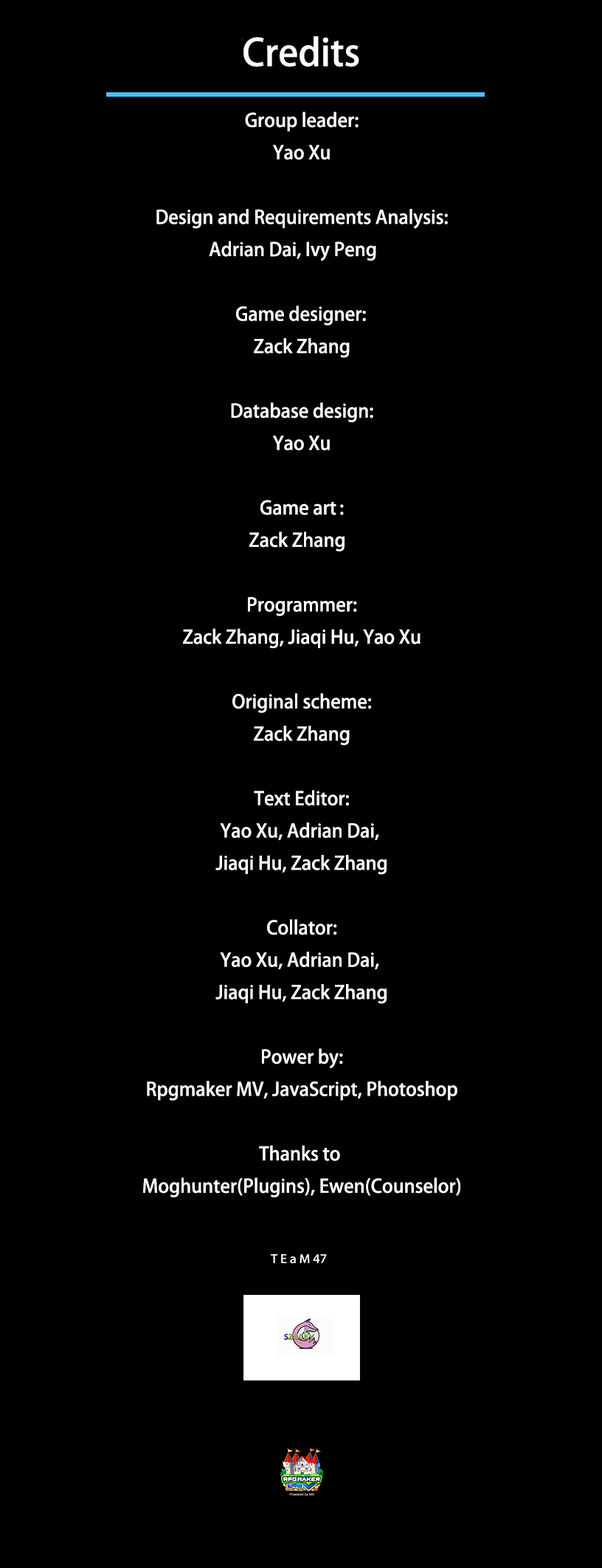
<style>
.page{position:relative;width:602px;height:1568px;background:#000000}
.page>*{position:absolute;margin:0}
.t1{font:36.9px "AdobeHeitiStd-Regular";color:#ffffff}
.t2{font:18.5px "AdobeHeitiStd-Regular";color:#ffffff}
</style>
<div class="page">
<p class="t1" style="left:244px;top:36px;width:116px;height:31px">Credits</p>
<p class="t2" style="left:143px;top:111px;width:318px;height:1086px;text-align:center">Group leader:<br>Yao Xu<br><br>Design and Requirements Analysis:<br>Adrian Dai, Ivy Peng <br><br>Game designer: <br>Zack Zhang<br><br>Database design:<br>Yao Xu<br><br>Game art :<br>Zack Zhang <br><br>Programmer:<br>Zack Zhang, Jiaqi Hu, Yao Xu<br><br>Original scheme:<br>Zack Zhang<br><br>Text Editor:<br>Yao Xu, Adrian Dai, <br>Jiaqi Hu, Zack Zhang<br><br>Collator:<br>Yao Xu, Adrian Dai, <br>Jiaqi Hu, Zack Zhang<br><br>Power by:<br>Rpgmaker MV, JavaScript, Photoshop<br><br>Thanks to <br>Moghunter(Plugins), Ewen(Counselor)</p>
</div>
